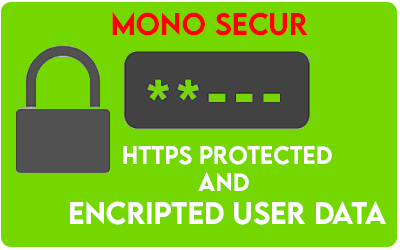
<style>
.page{position:relative;width:400px;height:250px;background:#74d700}
.page>*{position:absolute;margin:0}
.t1{font:27.8px "LEMONMILK-Medium";color:#ff0000}
.t2{font:22.2px "LEMONMILK-Medium";color:#ffffff}
.t3{font:27.8px "LEMONMILK-Medium";color:#ffffff}
</style>
<div class="page">
<p class="t1" style="left:112px;top:12px;width:196px;height:24px">mono secur</p>
<p class="t2" style="left:70px;top:146px;width:316px;height:79px;text-align:center">https protected<br>and <br><span class="t3">encripted user data</span></p>
</div>
